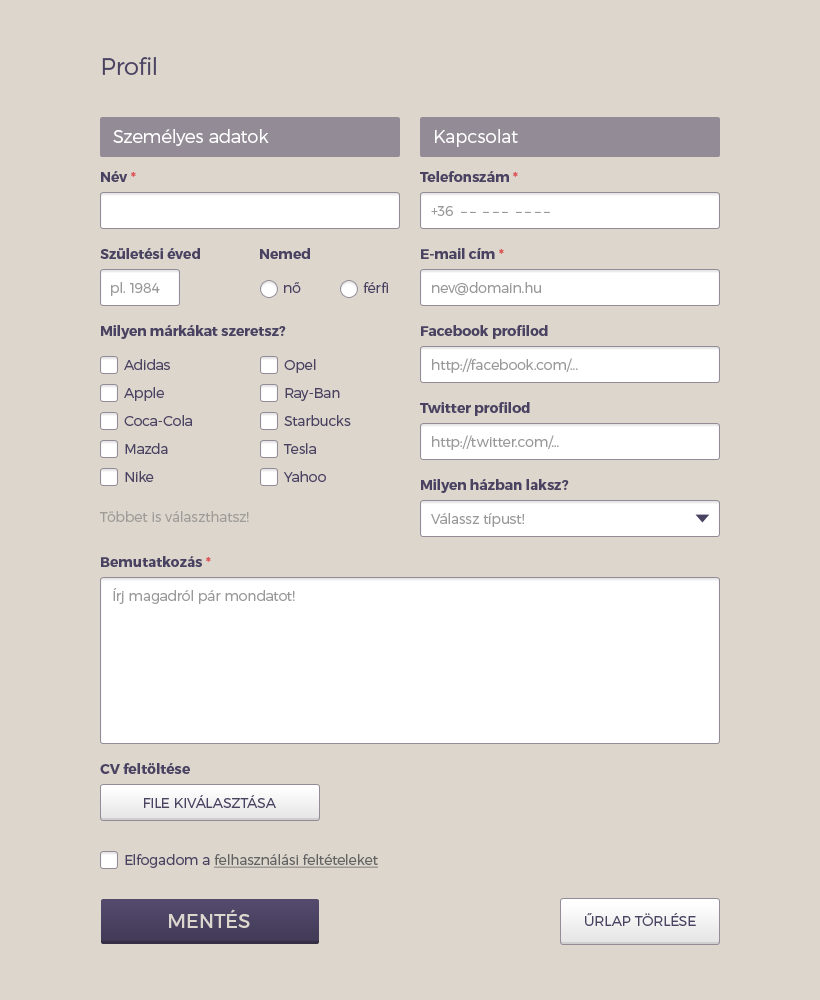
<style>
.page{position:relative;width:820px;height:1000px;background:#dcd6cd}
.page>*{position:absolute;margin:0}
.t1{font:24px "Montserrat-Light";color:#4a4261}
.t2{font:18px "Montserrat-Light";color:#ffffff}
.t3{font:14px "Montserrat-Bold";color:#4a4261}
.t4{font:14px "Montserrat-Bold";color:#dc5656}
.t5{font:14px "Montserrat-Light";color:#999999}
.t6{font:14px "Montserrat-Light";color:#4a4261}
.t7{font:14px "Montserrat-Light";color:#9f9c98}
.t8{font:14px "Montserrat-Light";color:#4a4261;text-transform:uppercase}
.t9{font:14px "Montserrat-Light";color:#626262;text-decoration:underline}
.t10{font:20px "Montserrat-Regular";color:#dcd6cd;text-transform:uppercase}
</style>
<div class="page">
<p class="t1" style="left:102px;top:57px;width:54px;height:18px">Profil</p>
<p class="t2" style="left:113px;top:129px;width:156px;height:17px">Személyes adatok</p>
<p class="t2" style="left:435px;top:129px;width:83px;height:18px">Kapcsolat</p>
<p class="t3" style="left:101px;top:171px;width:35px;height:11px">Név <span class="t4">*</span></p>
<p class="t3" style="left:420px;top:171px;width:98px;height:11px">Telefonszám <span class="t4">*</span></p>
<p class="t5" style="left:431px;top:206px;width:119px;height:10px">+36  – –  – – –  – – – –</p>
<p class="t3" style="left:100px;top:248px;width:100px;height:11px">Születési éved</p>
<p class="t3" style="left:260px;top:248px;width:50px;height:11px">Nemed</p>
<p class="t3" style="left:421px;top:247px;width:83px;height:12px">E-mail cím <span class="t4">*</span></p>
<p class="t5" style="left:111px;top:282px;width:49px;height:14px">pl. 1984</p>
<p class="t6" style="left:284px;top:282px;width:17px;height:11px">nő</p>
<p class="t6" style="left:363px;top:282px;width:25px;height:11px">férfi</p>
<p class="t5" style="left:432px;top:282px;width:109px;height:14px">nev@domain.hu</p>
<p class="t3" style="left:101px;top:325px;width:185px;height:14px">Milyen márkákat szeretsz?</p>
<p class="t3" style="left:421px;top:325px;width:127px;height:14px">Facebook profilod</p>
<p class="t6" style="left:124px;top:359px;width:46px;height:11px">Adidas</p>
<p class="t6" style="left:284px;top:359px;width:32px;height:14px">Opel</p>
<p class="t5" style="left:432px;top:358px;width:146px;height:15px">http://facebook.com/...</p>
<p class="t6" style="left:124px;top:387px;width:40px;height:14px">Apple</p>
<p class="t6" style="left:285px;top:388px;width:55px;height:13px">Ray-Ban</p>
<p class="t3" style="left:420px;top:402px;width:110px;height:14px">Twitter profilod</p>
<p class="t6" style="left:124px;top:415px;width:68px;height:11px">Coca-Cola</p>
<p class="t6" style="left:284px;top:415px;width:67px;height:11px">Starbucks</p>
<p class="t5" style="left:432px;top:435px;width:127px;height:15px">http://twitter.com/...</p>
<p class="t6" style="left:125px;top:443px;width:43px;height:11px">Mazda</p>
<p class="t6" style="left:283px;top:443px;width:33px;height:11px">Tesla</p>
<p class="t6" style="left:125px;top:471px;width:29px;height:11px">Nike</p>
<p class="t6" style="left:284px;top:471px;width:42px;height:11px">Yahoo</p>
<p class="t3" style="left:421px;top:479px;width:148px;height:14px">Milyen házban laksz?</p>
<p class="t7" style="left:99px;top:511px;width:150px;height:11px">Többet is választhatsz!</p>
<p class="t5" style="left:431px;top:513px;width:93px;height:14px">Válassz típust!</p>
<p class="t3" style="left:101px;top:556px;width:110px;height:11px">Bemutatkozás <span class="t4">*</span></p>
<p class="t5" style="left:113px;top:588px;width:182px;height:16px">Írj magadról pár mondatot!</p>
<p class="t3" style="left:100px;top:763px;width:90px;height:11px">CV feltöltése</p>
<p class="t8" style="left:144px;top:795px;width:132px;height:13px">File kiválasztása</p>
<p class="t9" style="left:125px;top:854px;width:253px;height:14px"><span class="t6">Elfogadom a </span>felhasználási feltételeket</p>
<p class="t10" style="left:169px;top:909px;width:81px;height:19px">Mentés</p>
<p class="t8" style="left:585px;top:913px;width:111px;height:13px">űrlap törlése</p>
</div>
